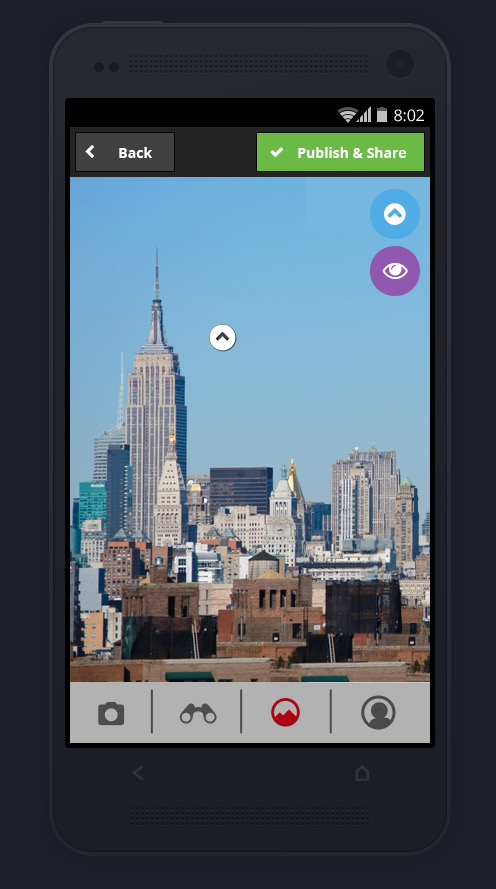
<style>
.page{position:relative;width:496px;height:889px}
.page>*{position:absolute;margin:0}
.t1{font:14px "OpenSans-Bold";color:#ffffff}
</style>
<div class="page">
<p class="t1" style="left:119px;top:147px;width:33px;height:11px">Back</p>
<p class="t1" style="left:298px;top:147px;width:108px;height:11px">Publish &amp; Share</p>
</div>
